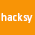
<style>
.page{position:relative;width:35px;height:35px;background:#f89406}
.page>*{position:absolute;margin:0}
.t1{font:12px "RopaSans-Regular";color:#ffffff}
</style>
<div class="page">
<p class="t1" style="left:1px;top:13px;width:32px;height:10px">hacksy</p>
</div>
